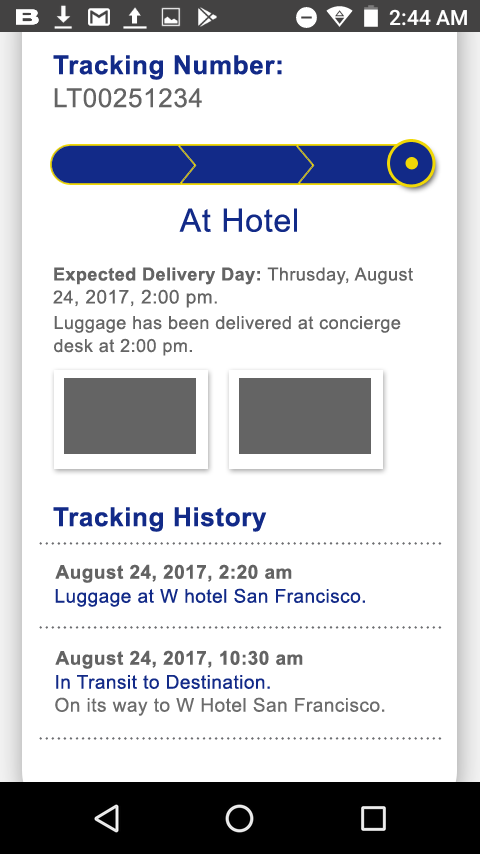
<style>
.page{position:relative;width:480px;height:854px;background:#ffffff}
.page>*{position:absolute;margin:0}
.t1{font:26px/33px "Arial-BoldMT";letter-spacing:0.025em;color:#122a88}
.t2{font:26px/33px "ArialMT";letter-spacing:0.025em;color:#646464}
.t3{font:32px "ArialMT";letter-spacing:0.025em;color:#122a88}
.t4{font:18px/23px "Arial-BoldMT";letter-spacing:0.025em;color:#646464}
.t5{font:18px/23px "ArialMT";letter-spacing:0.025em;color:#646464}
.t6{font:19px/23px "ArialMT";letter-spacing:0.025em;color:#646464}
.t7{font:18px/23px "ArialMT";letter-spacing:0.025em;color:#656565}
.t8{font:26px "Arial-BoldMT";letter-spacing:0.025em;color:#122a88}
.t9{font:19px "Arial-BoldMT";letter-spacing:0.025em;color:#636363}
.t10{font:19px "ArialMT";letter-spacing:0.025em;color:#122a88}
.t11{font:19px/23px "ArialMT";letter-spacing:0.025em;color:#6c6c6c}
.t12{font:19px/23px "ArialMT";letter-spacing:0.025em;color:#122a88}
</style>
<div class="page">
<p class="t1" style="left:53px;top:55px;width:229px;height:53px">Tracking Number:<br><span class="t2">LT00251234</span></p>
<p class="t3" style="left:179px;top:208px;width:118px;height:24px">At Hotel</p>
<p class="t4" style="left:53px;top:267px;width:360px;height:41px">Expected Delivery Day: <span class="t5">Thrusday, August 24</span><span class="t6">, 2017, 2:00 pm.</span></p>
<p class="t7" style="left:54px;top:316px;width:347px;height:40px">Luggage has been delivered at concierge desk at 2:00 pm.</p>
<p class="t8" style="left:53px;top:507px;width:214px;height:25px">Tracking History</p>
<p class="t9" style="left:55px;top:564px;width:237px;height:19px">August 24, 2017, 2:20 am</p>
<p class="t10" style="left:55px;top:588px;width:310px;height:19px">Luggage at W hotel San Francisco.</p>
<p class="t9" style="left:55px;top:650px;width:248px;height:19px">August 24, 2017, 10:30 am</p>
<p class="t11" style="left:55px;top:675px;width:330px;height:41px"><span class="t12">In Transit to Destination.<br></span>On its way to W Hotel San Francisco.</p>
</div>
